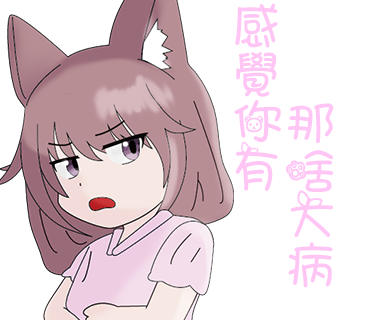
<style>
.page{position:relative;width:370px;height:320px;background:#ffffff}
.page>*{position:absolute;margin:0}
.t1{font:53.4px/47.5px "ARTianniuB5-Bold";letter-spacing:-0.04em;color:#ffc6f5}
</style>
<div class="page">
<p class="t1" style="left:234px;top:3px;width:47px;height:188px">感<br>覺<br>你<br>有</p>
<p class="t1" style="left:286px;top:103px;width:48px;height:185px">那<br>啥<br>大<br>病</p>
</div>
